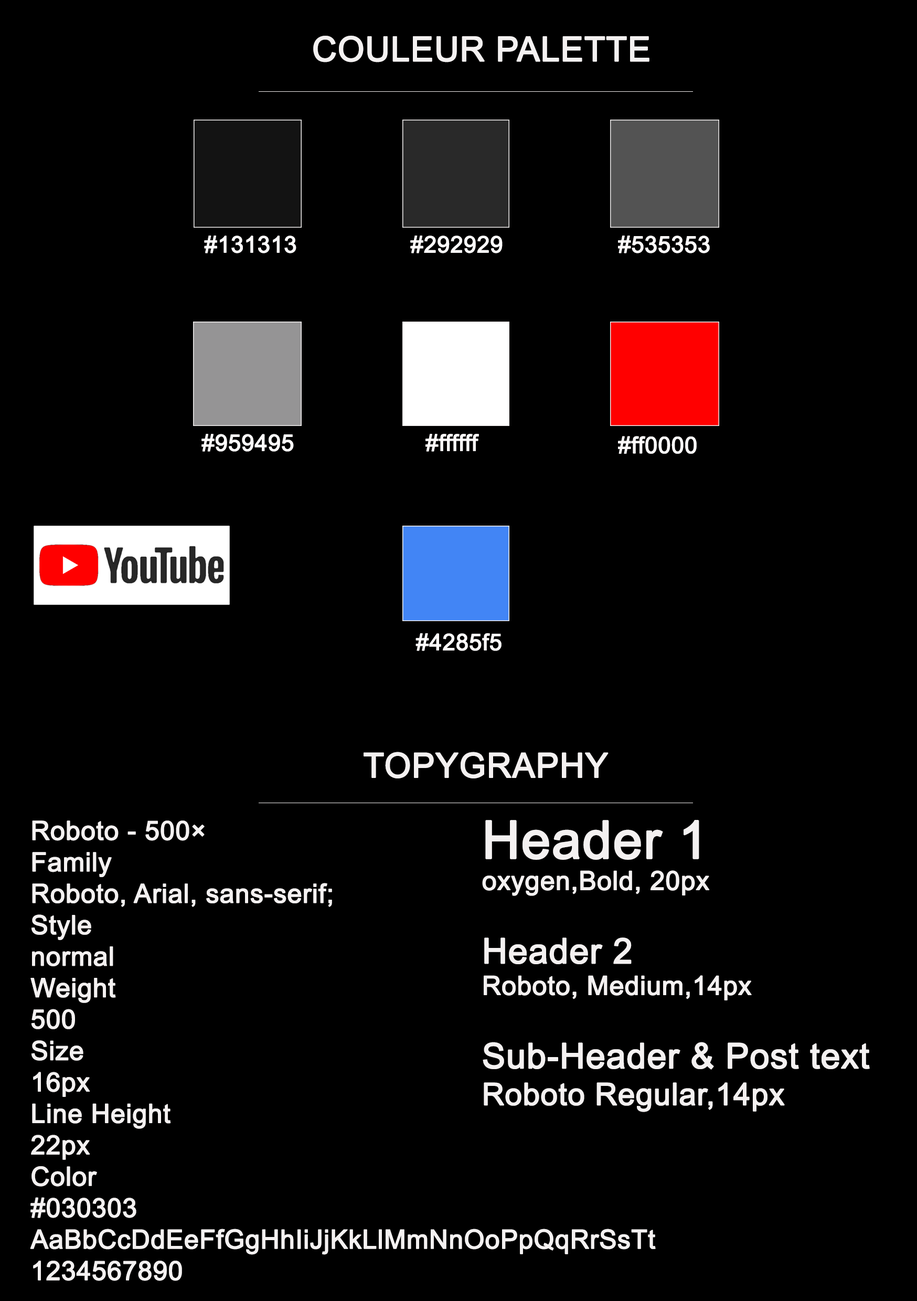
<style>
.page{position:relative;width:917px;height:1301px;background:#000000}
.page>*{position:absolute;margin:0}
.t1{font:34.1px "ArialMT";color:#f4f1f1;font-weight:bold}
.t2{font:22.7px "ArialMT";color:#fdfbfb;font-weight:bold}
.t3{font:26.2px "ArialMT";color:#f4f1f1;font-weight:bold}
.t4{font:35px "ArialMT";color:#f4f1f1;font-weight:bold}
.t5{font:52.4px "ArialMT";color:#f4f1f1;font-weight:bold}
.t6{font:30.6px "ArialMT";color:#f4f1f1;font-weight:bold}
</style>
<div class="page">
<p class="t1" style="left:313px;top:36px;width:336px;height:26px">COULEUR PALETTE</p>
<p class="t2" style="left:204px;top:235px;width:92px;height:18px">#131313</p>
<p class="t2" style="left:410px;top:235px;width:92px;height:18px">#292929</p>
<p class="t2" style="left:618px;top:235px;width:92px;height:18px">#535353</p>
<p class="t2" style="left:201px;top:434px;width:93px;height:18px">#959495</p>
<p class="t2" style="left:425px;top:434px;width:54px;height:18px">#ffffff</p>
<p class="t2" style="left:618px;top:436px;width:78px;height:18px">#ff0000</p>
<p class="t2" style="left:415px;top:633px;width:86px;height:18px">#4285f5</p>
<p class="t1" style="left:363px;top:752px;width:245px;height:26px">TOPYGRAPHY</p>
<p class="t3" style="left:30px;top:820px;width:626px;height:461px">Roboto - 500×<br>Family<br>Roboto, Arial, sans-serif;<br>Style<br>normal<br>Weight<br>500<br>Size<br>16px<br>Line Height<br>22px<br>Color<br>#030303<br>AaBbCcDdEeFfGgHhIiJjKkLlMmNnOoPpQqRrSsTt<br>1234567890</p>
<p class="t4" style="left:482px;top:820px;width:388px;height:292px"><span class="t5">Header 1<br></span><span class="t3">oxygen,Bold, 20px<br><br></span>Header 2<br><span class="t3">Roboto, Medium,14px<br><br></span>Sub-Header &amp; Post text<br><span class="t6">Roboto Regular,14px</span></p>
</div>
